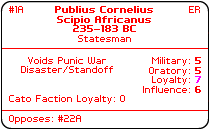
<style>
.page{position:relative;width:210px;height:130px;background:#ffffff}
.page>*{position:absolute;margin:0}
.t1{font:8px "PFTempestaSeven";color:#ff0000}
.t2{font:8px "PFTempestaSeven-Bold";color:#ff0000}
.t3{font:8px "PFTempestaSeven";color:#fe0000}
.t4{font:8px "PFTempestaSeven-Bold";color:#ff00ff}
</style>
<div class="page">
<p class="t1" style="left:9px;top:6px;width:14px;height:7px">#1A</p>
<p class="t2" style="left:55px;top:6px;width:98px;height:26px;text-align:center">Publius Cornelius<br>Scipio Africanus<br>235–183 BC</p>
<p class="t1" style="left:189px;top:6px;width:11px;height:7px">ER</p>
<p class="t3" style="left:78px;top:35px;width:53px;height:7px">Statesman</p>
<p class="t1" style="left:9px;top:57px;width:116px;height:47px;text-align:center">Voids Punic War Disaster/Standoff<br><br><br>Cato Faction Loyalty: 0</p>
<p class="t1" style="left:143px;top:57px;width:58px;height:36px;text-align:right">Military: <span class="t2">5<br></span>Oratory: <span class="t2">5<br></span>Loyalty: <span class="t4">7<br></span>Influence: <span class="t2">6</span></p>
<p class="t1" style="left:9px;top:115px;width:72px;height:9px">Opposes: #22A</p>
</div>
